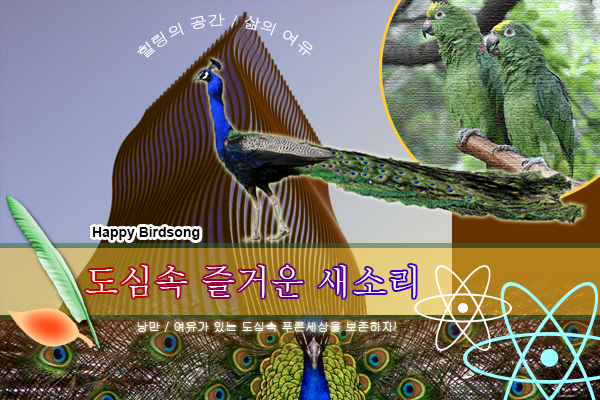
<style>
.page{position:relative;width:600px;height:400px}
.page>*{position:absolute;margin:0}
.t1{font:15px "Dotum";color:#ffffff}
.t2{font:13.8px "Arial-BoldMT";color:#000000}
.t3{font:34.6px "Batang";color:#ffffff}
.t4{font:11.9px "Gulim";color:#ffffff}
</style>
<div class="page">
<p class="t1" style="left:137px;top:13px;width:176px;height:45px">힐링의 공간 / 삶의 여유</p>
<p class="t2" style="left:93px;top:227px;width:107px;height:13px">Happy Birdsong</p>
<p class="t3" style="left:86px;top:265px;width:330px;height:33px">도심속 즐거운 새소리</p>
<p class="t4" style="left:137px;top:321px;width:259px;height:11px">낭만 / 여유가 있는 도심속 푸른세상을 보존하자!</p>
</div>
